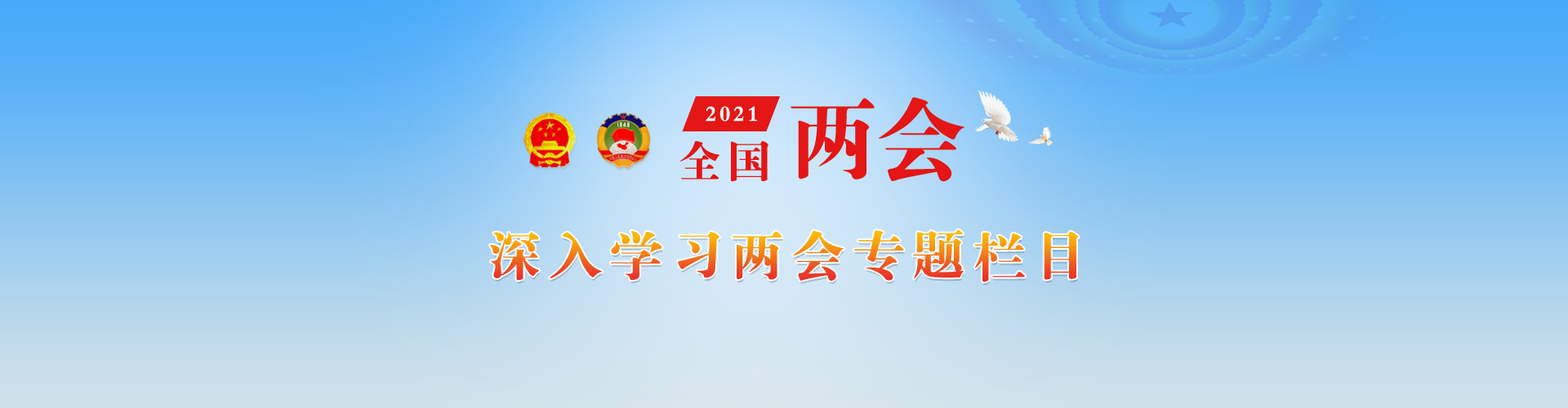
<style>
.page{position:relative;width:1568px;height:408px}
.page>*{position:absolute;margin:0}
.t1{font:91.3px "FZDBSJW--GB1-0";letter-spacing:-0.04em;color:#e41616}
.t2{font:22.6px "FZDBSJW--GB1-0";letter-spacing:0.12em;color:#ffffff}
.t3{font:44.4px "FZDBSJW--GB1-0";letter-spacing:0.12em;color:#e41616}
.t4{font:54.1px "FZDBSJW--GB1-0";letter-spacing:0.12em}
</style>
<div class="page">
<p class="t1" style="left:791px;top:97px;width:173px;height:85px">两会</p>
<p class="t2" style="left:706px;top:106px;width:51px;height:16px">2021</p>
<p class="t3" style="left:679px;top:141px;width:89px;height:41px">全国</p>
<p class="t4" style="left:490px;top:229px;width:589px;height:54px">深入学习两会专题栏目</p>
</div>
